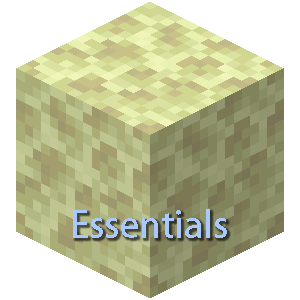
<style>
.page{position:relative;width:300px;height:300px;background:#ffffff}
.page>*{position:absolute;margin:0}
.t1{font:36px "AdobeHeitiStd-Regular";color:#aac7ff}
</style>
<div class="page">
<p class="t1" style="left:73px;top:209px;width:154px;height:29px">Ｅssentials</p>
</div>
